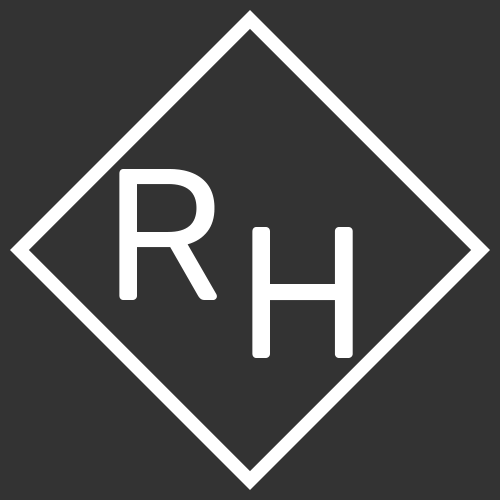
<style>
.page{position:relative;width:500px;height:500px;background:#333333}
.page>*{position:absolute;margin:0}
.t1{font:186.7px "Rubik-Regular";color:#ffffff}
</style>
<div class="page">
<p class="t1" style="left:119px;top:169px;width:98px;height:131px">R</p>
<p class="t1" style="left:252px;top:227px;width:101px;height:131px">H</p>
</div>
